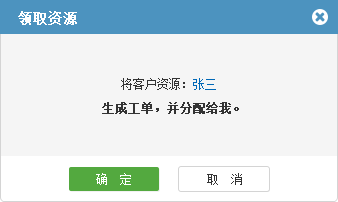
<style>
.page{position:relative;width:338px;height:202px;background:#f5f5f5}
.page>*{position:absolute;margin:0}
.t1{font:14px "SimSun";color:#ffffff;font-weight:bold}
.t2{font:12px "SimSun";color:#333333}
.t3{font:12px "SimSun";color:#0068b7}
.t4{font:12px "SimSun";color:#333333;font-weight:bold}
.t5{font:12px "SimSun";color:#ffffff}
</style>
<div class="page">
<p class="t1" style="left:18px;top:11px;width:59px;height:14px">领取资源</p>
<p class="t2" style="left:121px;top:78px;width:95px;height:12px">将客户资源：<span class="t3">张三</span></p>
<p class="t4" style="left:102px;top:102px;width:137px;height:12px">生成工单，并分配给我。</p>
<p class="t5" style="left:96px;top:173px;width:35px;height:12px">确  定</p>
<p class="t2" style="left:207px;top:173px;width:35px;height:12px">取  消</p>
</div>
